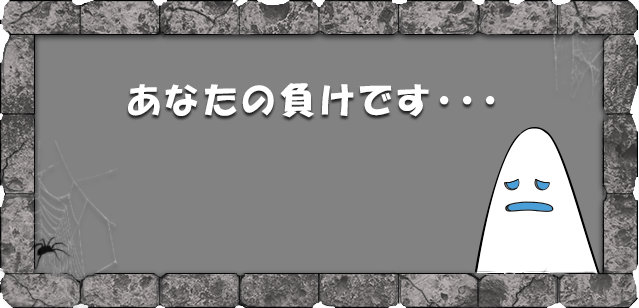
<style>
.page{position:relative;width:639px;height:308px;background:#828282}
.page>*{position:absolute;margin:0}
.t1{font:36px "HGPSoeiKakupoptai";letter-spacing:0.14em;color:#ffffff}
</style>
<div class="page">
<p class="t1" style="left:128px;top:83px;width:367px;height:35px">あなたの負けです・・・</p>
</div>
